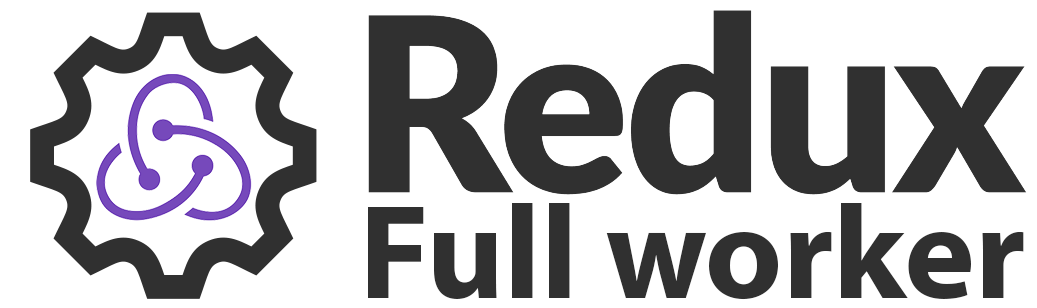
<style>
.page{position:relative;width:1037px;height:308px;background:#ffffff}
.page>*{position:absolute;margin:0}
.t1{font:134.4px "MyriadPro-Bold";color:#303030}
</style>
<div class="page">
<p class="t1" style="left:368px;top:203px;width:656px;height:97px">Full worker</p>
</div>
